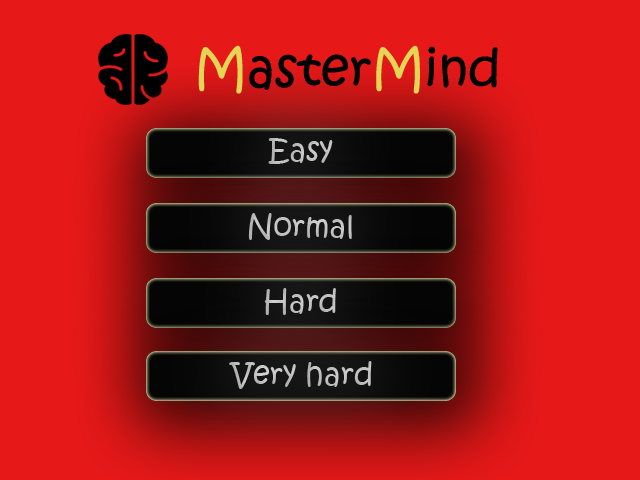
<style>
.page{position:relative;width:640px;height:480px;background:#e71818}
.page>*{position:absolute;margin:0}
.t1{font:50px "KristenITC-Regular";color:#010101}
.t2{font:50px "KristenITC-Regular";color:#e4d554}
.t3{font:30px "KristenITC-Regular";color:#c0c0c0}
.t4{font:30px "KristenITC-Regular";color:#c2c2c2}
.t5{font:30px "KristenITC-Regular";color:#c1c1c1}
</style>
<div class="page">
<p class="t1" style="left:198px;top:45px;width:300px;height:49px"><span class="t2">M</span>aster<span class="t2">M</span>ind</p>
<p class="t3" style="left:268px;top:138px;width:65px;height:26px">Easy</p>
<p class="t4" style="left:248px;top:213px;width:104px;height:27px">Normal</p>
<p class="t4" style="left:264px;top:288px;width:72px;height:27px">Hard</p>
<p class="t5" style="left:229px;top:361px;width:143px;height:28px">Very hard</p>
</div>
